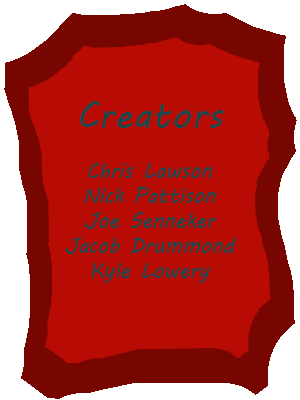
<style>
.page{position:relative;width:300px;height:400px;background:#b80b03}
.page>*{position:absolute;margin:0}
.t1{font:20.8px "MVBoli";color:#12484e}
.t2{font:37.5px "MVBoli";color:#12484e}
</style>
<div class="page">
<p class="t1" style="left:65px;top:101px;width:171px;height:182px;text-align:center"><span class="t2">Creators<br></span><br>Chris Lawson<br>Nick Pattison<br>Joe Senneker<br>Jacob Drummond<br>Kyle Lowery</p>
</div>
